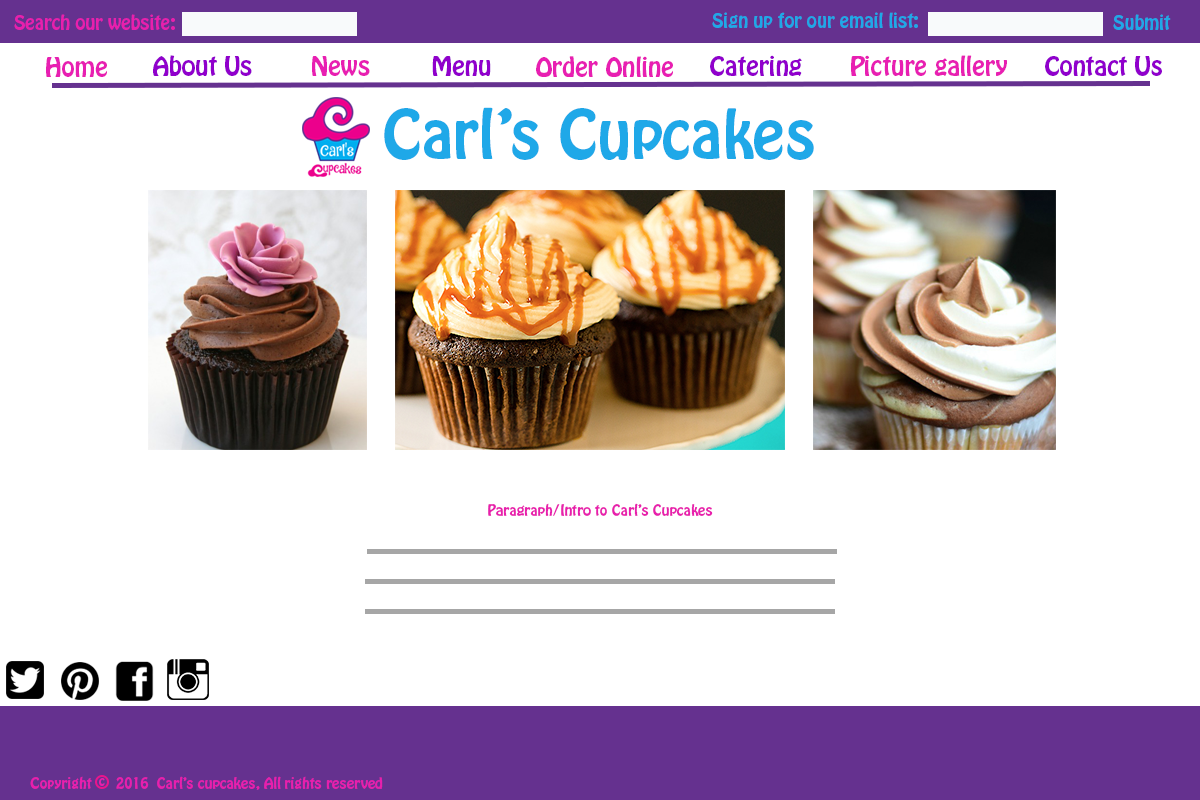
<style>
.page{position:relative;width:1200px;height:800px;background:#ffffff}
.page>*{position:absolute;margin:0}
.t1{font:18px "HoboStd";color:#e81fad}
.t2{font:18px "HoboStd";color:#1fa8e8}
.t3{font:24px "HoboStd";color:#e81fb2}
.t4{font:24px "HoboStd";color:#9000cc}
.t5{font:60px "HoboStd";color:#1fa8e8}
.t6{font:14px "HoboStd";color:#e81fad}
.t7{font:12px "HoboStd";color:#e81fad}
</style>
<div class="page">
<p class="t1" style="left:14px;top:14px;width:161px;height:16px">Search our website:</p>
<p class="t2" style="left:712px;top:12px;width:206px;height:16px">Sign up for our email list:</p>
<p class="t2" style="left:1113px;top:14px;width:58px;height:16px">Submit</p>
<p class="t3" style="left:46px;top:57px;width:61px;height:20px">Home</p>
<p class="t4" style="left:153px;top:55px;width:99px;height:21px">About Us</p>
<p class="t3" style="left:312px;top:56px;width:58px;height:20px">News</p>
<p class="t4" style="left:432px;top:56px;width:59px;height:20px">Menu</p>
<p class="t3" style="left:536px;top:56px;width:137px;height:21px">Order Online</p>
<p class="t4" style="left:710px;top:55px;width:92px;height:21px">Catering</p>
<p class="t3" style="left:851px;top:55px;width:156px;height:21px">Picture gallery</p>
<p class="t4" style="left:1045px;top:56px;width:117px;height:20px">Contact Us</p>
<p class="t5" style="left:384px;top:107px;width:430px;height:53px">Carl’s Cupcakes</p>
<p class="t6" style="left:488px;top:503px;width:225px;height:13px">Paragraph/Intro to Carl’s Cupcakes</p>
<p class="t6" style="left:30px;top:776px;width:353px;height:14px">Copyright      2016  Carl’s cupcakes, All rights reserved</p>
<p class="t7" style="left:99px;top:778px;width:6px;height:8px">c</p>
</div>
